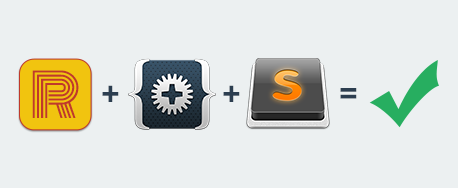
<style>
.page{position:relative;width:458px;height:188px;background:#ecf0f1}
.page>*{position:absolute;margin:0}
.t1{font:58.7px "Monoton-Regular";letter-spacing:0.025em;color:#c0392b}
.t2{font:30px "Helvetica-Bold";letter-spacing:0.025em;color:#2c3e50}
</style>
<div class="page">
<p class="t1" style="left:32px;top:70px;width:47px;height:48px">R</p>
<p class="t2" style="left:102px;top:85px;width:17px;height:17px">+</p>
<p class="t2" style="left:223px;top:85px;width:17px;height:17px">+</p>
<p class="t2" style="left:340px;top:88px;width:17px;height:11px">=</p>
</div>
